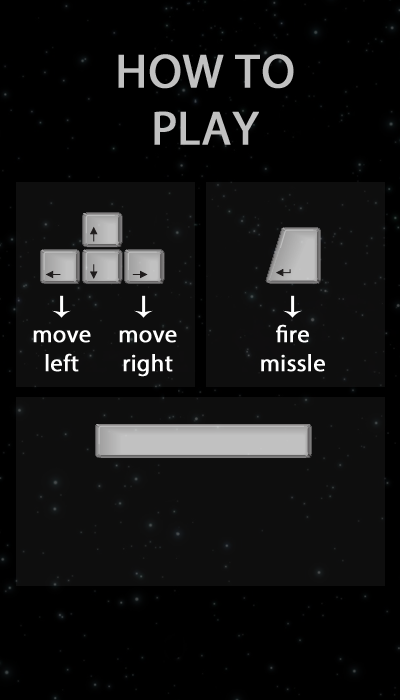
<style>
.page{position:relative;width:400px;height:700px;background:#000000}
.page>*{position:absolute;margin:0}
.t1{font:48px "MyriadPro-Regular";color:#c1c1c1;font-weight:bold}
.t2{font:24px "MyriadPro-Regular";color:#ffffff;font-weight:bold}
</style>
<div class="page">
<p class="t1" style="left:118px;top:54px;width:176px;height:91px;text-align:center">HOW TO PLAY</p>
<p class="t2" style="left:261px;top:324px;width:64px;height:48px;text-align:center">fire<br>missle</p>
<p class="t2" style="left:33px;top:330px;width:58px;height:42px;text-align:center">move<br>left</p>
<p class="t2" style="left:119px;top:330px;width:58px;height:47px;text-align:center">move<br>right</p>
</div>
